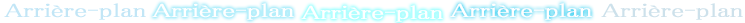
<style>
.page{position:relative;width:745px;height:23px;background:#ffffff}
.page>*{position:absolute;margin:0}
.t1{font:19.2px "MS-PMincho";color:#b2dff4;font-weight:bold;scale:1.39 1}
.t2{font:19.2px "MS-PMincho";color:#b2dff4;font-weight:bold;scale:1.12 1}
.t3{font:19.2px "MS-PMincho";color:#ffffff;font-weight:bold;scale:1.39 1}
.t4{font:19.2px "MS-PMincho";color:#ffffff;font-weight:bold;scale:1.12 1}
.t5{font:19.2px "MS-PMincho";color:#c0d9e5;font-weight:bold;scale:1.39 1}
.t6{font:19.2px "MS-PMincho";color:#c0d9e5;font-weight:bold;scale:1.12 1}
</style>
<div class="page">
<p class="t1" style="left:4px;top:3px;width:142px;height:17px;opacity:0.79">Arrière<span class="t2">-</span>plan</p>
<p class="t3" style="left:152px;top:3px;width:142px;height:17px">Arrière<span class="t4">-</span>plan</p>
<p class="t3" style="left:301px;top:5px;width:142px;height:17px">Arrière<span class="t4">-</span>plan</p>
<p class="t3" style="left:450px;top:3px;width:142px;height:17px">Arrière<span class="t4">-</span>plan</p>
<p class="t5" style="left:601px;top:3px;width:142px;height:17px;opacity:0.79">Arrière<span class="t6">-</span>plan</p>
</div>
